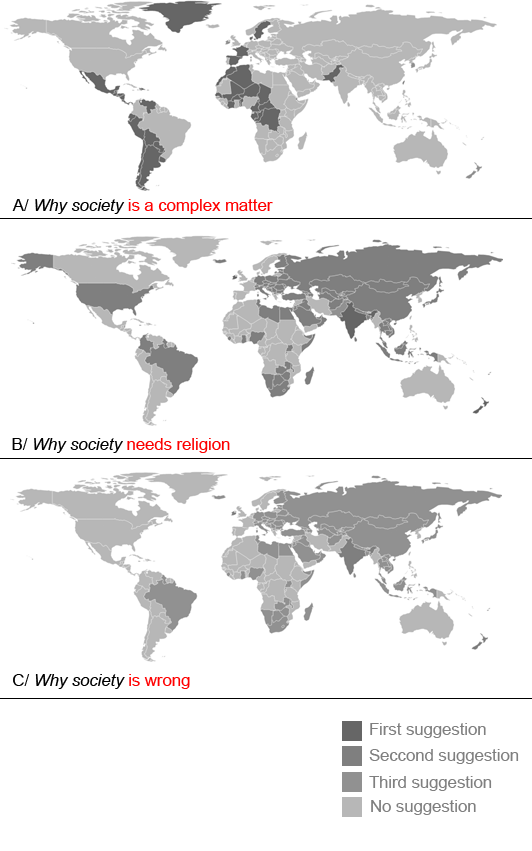
<style>
.page{position:relative;width:532px;height:851px;background:#ffffff}
.page>*{position:absolute;margin:0}
.t1{font:16.7px "ArialMT";color:#ff0000}
.t2{font:16.7px "ArialMT";color:#000000}
.t3{font:16.7px "Arial-ItalicMT";color:#000000}
.t4{font:16.7px "ArialMT";color:#fc0000}
.t5{font:16.7px "ArialMT";color:#7f7f7f}
</style>
<div class="page">
<p class="t1" style="left:12px;top:199px;width:261px;height:15px"><span class="t2">A/ </span><span class="t3">Why society </span>is a complex matter</p>
<p class="t4" style="left:12px;top:438px;width:218px;height:15px"><span class="t2">B/ </span><span class="t3">Why society </span>needs religion</p>
<p class="t3" style="left:13px;top:674px;width:177px;height:15px"><span class="t2">C/ </span>Why society<span class="t1"> is wrong</span></p>
<p class="t5" style="left:370px;top:723px;width:116px;height:15px">First suggestion</p>
<p class="t5" style="left:369px;top:749px;width:150px;height:15px">Seccond suggestion</p>
<p class="t5" style="left:369px;top:776px;width:123px;height:15px">Third suggestion</p>
<p class="t5" style="left:371px;top:800px;width:105px;height:15px">No suggestion</p>
</div>
